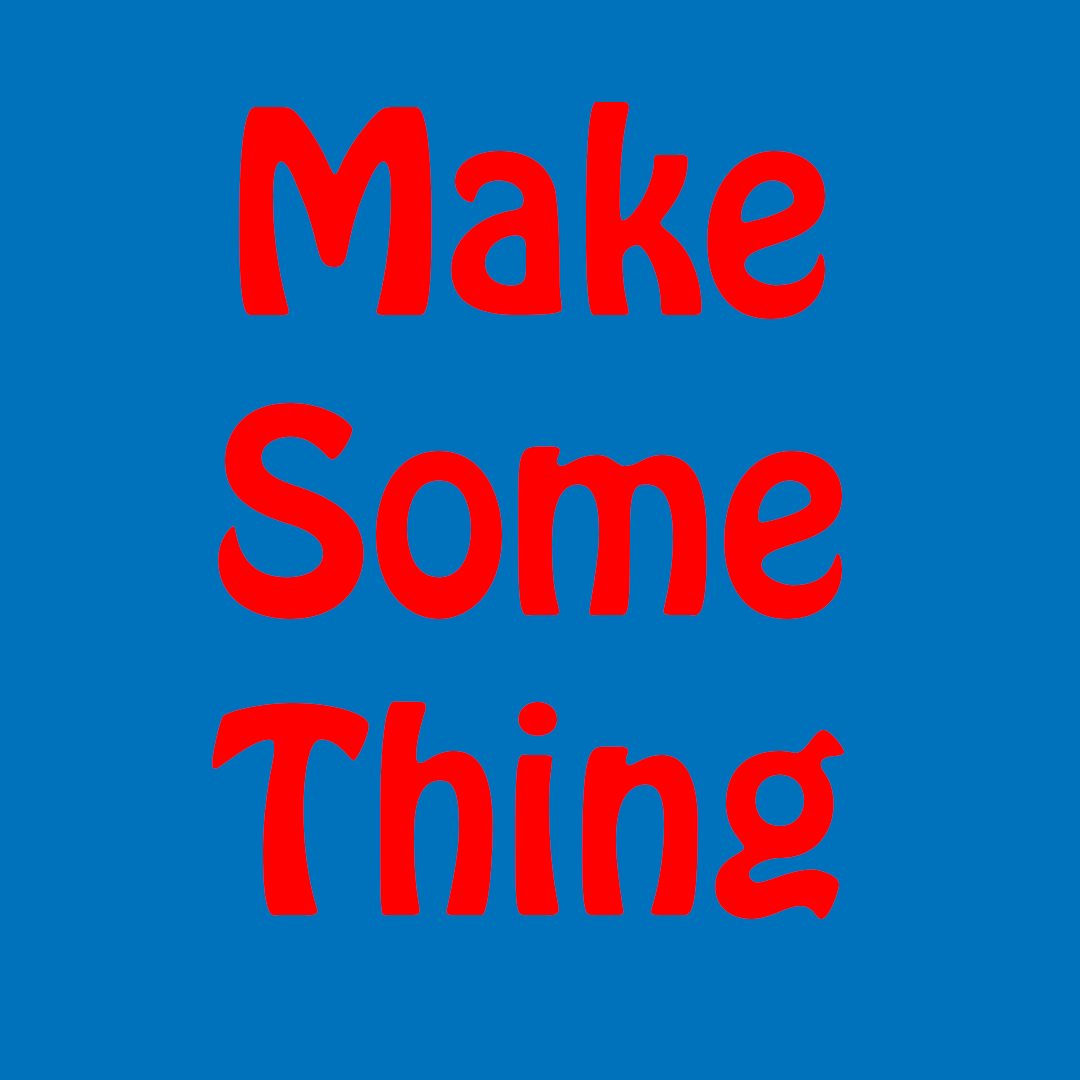
<style>
.page{position:relative;width:1080px;height:1080px;background:#0072bc}
.page>*{position:absolute;margin:0}
.t1{font:250px "HoboStd";color:#ff0000}
</style>
<div class="page">
<p class="t1" style="left:212px;top:102px;width:632px;height:817px;text-align:center">Make<br>Some Thing</p>
</div>
